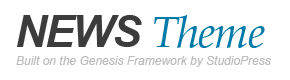
<style>
.page{position:relative;width:290px;height:80px;background:#ffffff}
.page>*{position:absolute;margin:0}
.t1{font:44.5px "BookAntiqua-Italic";letter-spacing:-0.025em;color:#007aa9}
.t2{font:44.5px "Arial-BoldItalicMT";letter-spacing:-0.05em;color:#3c3c3c;text-transform:uppercase}
.t3{font:12px "Arial-ItalicMT";color:#bababa}
</style>
<div class="page">
<p class="t1" style="left:17px;top:15px;width:248px;height:33px"><span class="t2">News </span>Theme</p>
<p class="t3" style="left:16px;top:56px;width:255px;height:11px">Built on the Genesis Framework by StudioPress</p>
</div>
